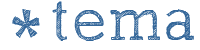
<style>
.page{position:relative;width:200px;height:50px;background:#ffffff}
.page>*{position:absolute;margin:0}
.t1{font:61.9px "SketchBlock-Light";letter-spacing:0.05em;color:#336699}
.t2{font:72px "SketchBlock-Bold";letter-spacing:0.05em;color:#336699}
</style>
<div class="page">
<p class="t1" style="left:52px;top:1px;width:142px;height:40px">tema</p>
<p class="t2" style="left:12px;top:9px;width:28px;height:29px">*</p>
</div>
